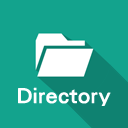
<style>
.page{position:relative;width:128px;height:128px;background:#13a38d}
.page>*{position:absolute;margin:0}
.t1{font:20.9px "HanWangHeiHeavy";color:#ffffff;scale:1.06 1}
</style>
<div class="page">
<p class="t1" style="left:18px;top:87px;width:93px;height:19px">Directory</p>
</div>
